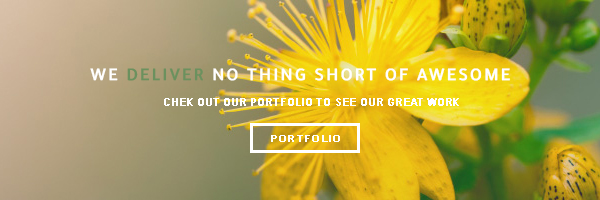
<style>
.page{position:relative;width:600px;height:200px}
.page>*{position:absolute;margin:0}
.t1{font:18px "Tajawal-Medium";letter-spacing:0.1em;color:#ffffff;text-transform:uppercase;font-weight:bold}
.t2{font:18px "Tajawal-Medium";letter-spacing:0.1em;color:#6b915e;text-transform:uppercase;font-weight:bold}
.t3{font:11px "ArialMT";letter-spacing:0.1em;color:#ffffff;text-transform:uppercase;font-weight:bold;scale:0.79 1}
.t4{font:10px "ArialMT";letter-spacing:0.1em;color:#ffffff;text-transform:uppercase;font-weight:bold}
</style>
<div class="page">
<p class="t1" style="left:90px;top:68px;width:420px;height:13px">WE <span class="t2">DELIVER </span>NO THING SHORT OF AWESOME</p>
<p class="t3" style="left:164px;top:98px;width:295px;height:8px">chek out our portfolio to see our great work</p>
<p class="t4" style="left:271px;top:135px;width:69px;height:7px">portfolio</p>
</div>
